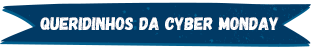
<style>
.page{position:relative;width:313px;height:49px;background:#013a65}
.page>*{position:absolute;margin:0}
.t1{font:14.9px "Gagalin";color:#ffffff}
</style>
<div class="page">
<p class="t1" style="left:40px;top:17px;width:239px;height:13px">queridinhos da cyber monday</p>
</div>
